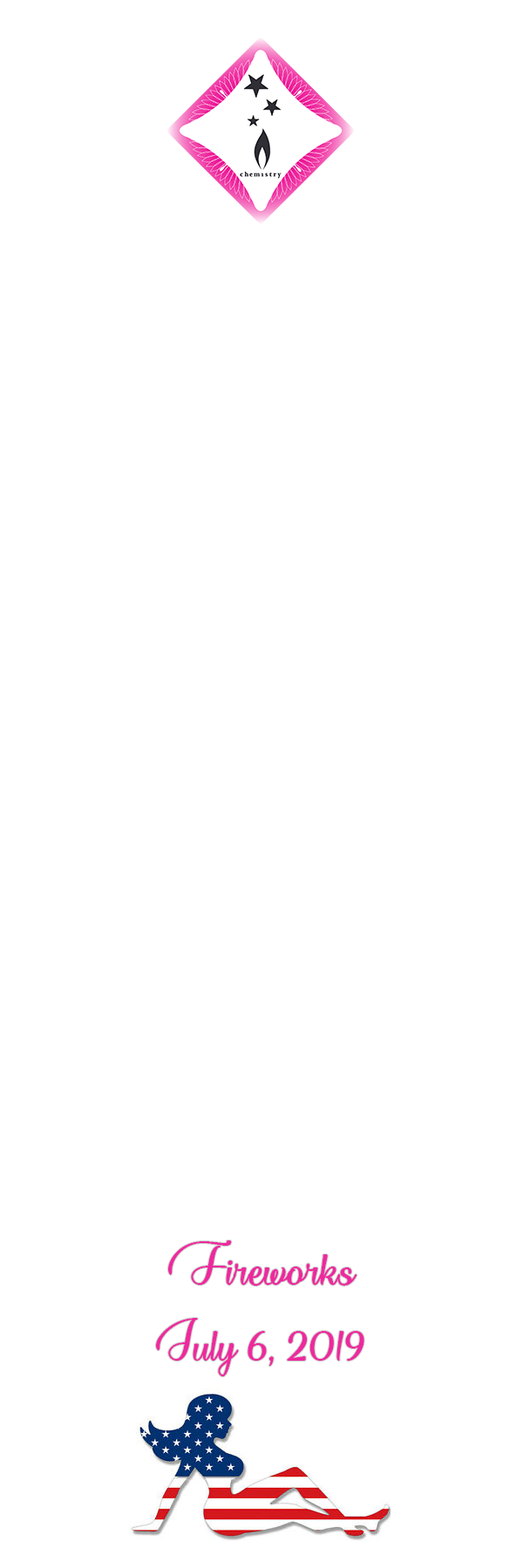
<style>
.page{position:relative;width:523px;height:1568px;background:#ffffff}
.page>*{position:absolute;margin:0}
.t1{font:62.7px "DreamHer-Regular";color:#ee299e}
.t2{font:61px "DreamHer-Regular";color:#ee299e}
</style>
<div class="page">
<p class="t1" style="left:168px;top:1240px;width:189px;height:46px">Fireworks</p>
<p class="t2" style="left:156px;top:1318px;width:208px;height:58px">July 6, 2019</p>
</div>
